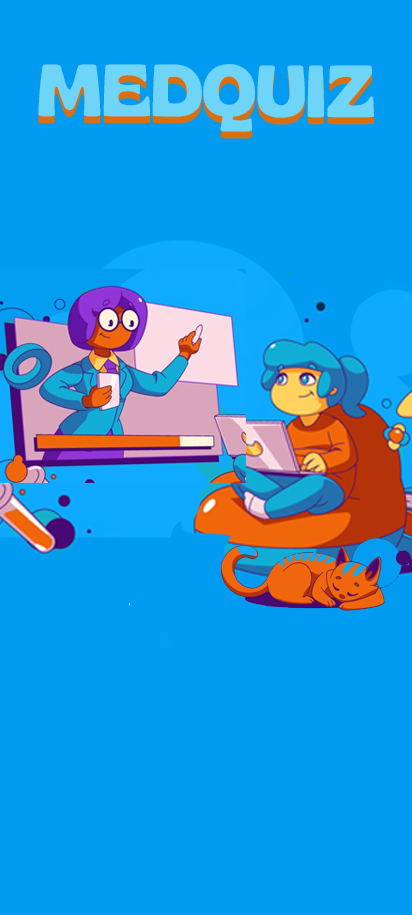
<style>
.page{position:relative;width:412px;height:915px;background:#019cf1}
.page>*{position:absolute;margin:0}
.t1{font:73.4px "Gliker-SemiBold";letter-spacing:-0.005em;color:#6ecef6}
</style>
<div class="page">
<p class="t1" style="left:38px;top:64px;width:336px;height:68px">MEDQUIZ</p>
</div>
